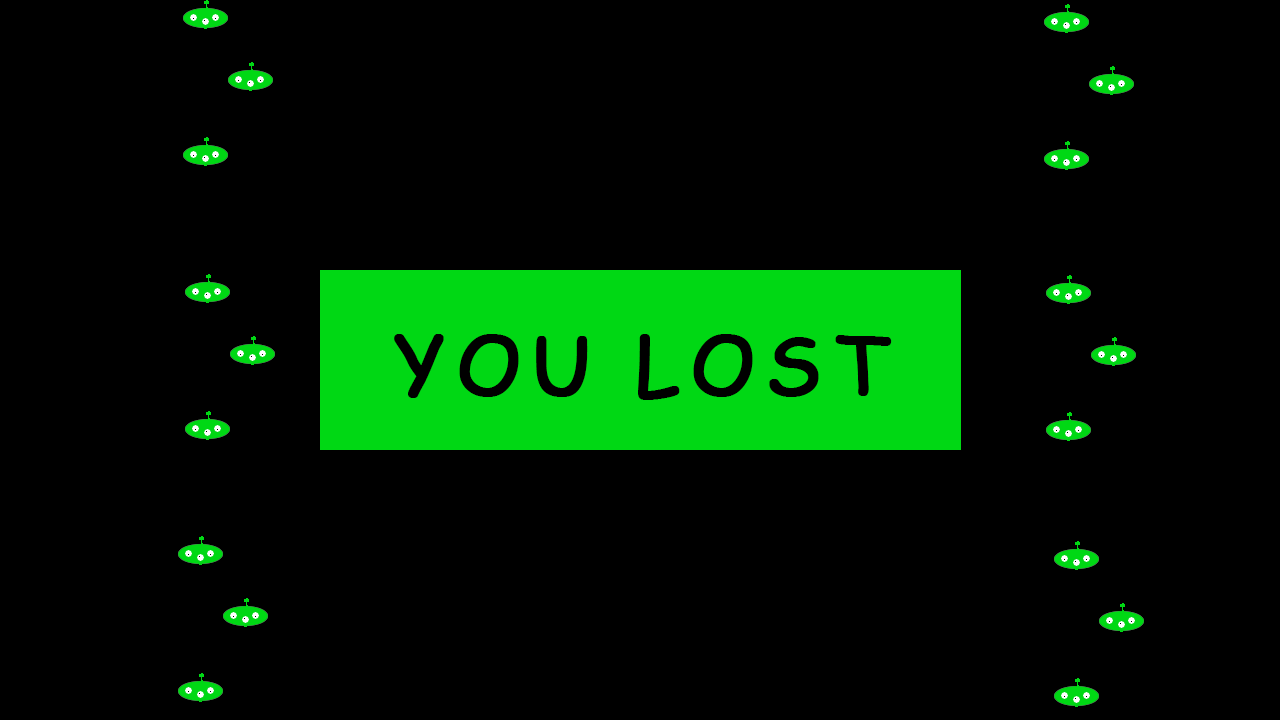
<style>
.page{position:relative;width:1280px;height:720px;background:#000000}
.page>*{position:absolute;margin:0}
.t1{font:81px "ComicSansMS";letter-spacing:0.1em;color:#000000;font-weight:bold}
</style>
<div class="page">
<p class="t1" style="left:394px;top:334px;width:498px;height:66px">YOU LOST</p>
</div>
